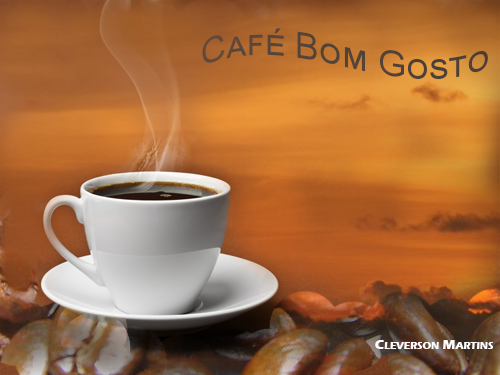
<style>
.page{position:relative;width:500px;height:375px}
.page>*{position:absolute;margin:0}
.t1{font:36px "ArialMT";color:#41403e;font-variant:small-caps}
.t2{font:14px "ErasITC-Bold";color:#ffffff;font-variant:small-caps}
</style>
<div class="page">
<p class="t1" style="left:202px;top:28px;width:286px;height:51px">Café Bom Gosto</p>
<p class="t2" style="left:375px;top:340px;width:118px;height:9px">Cleverson Martins</p>
</div>
